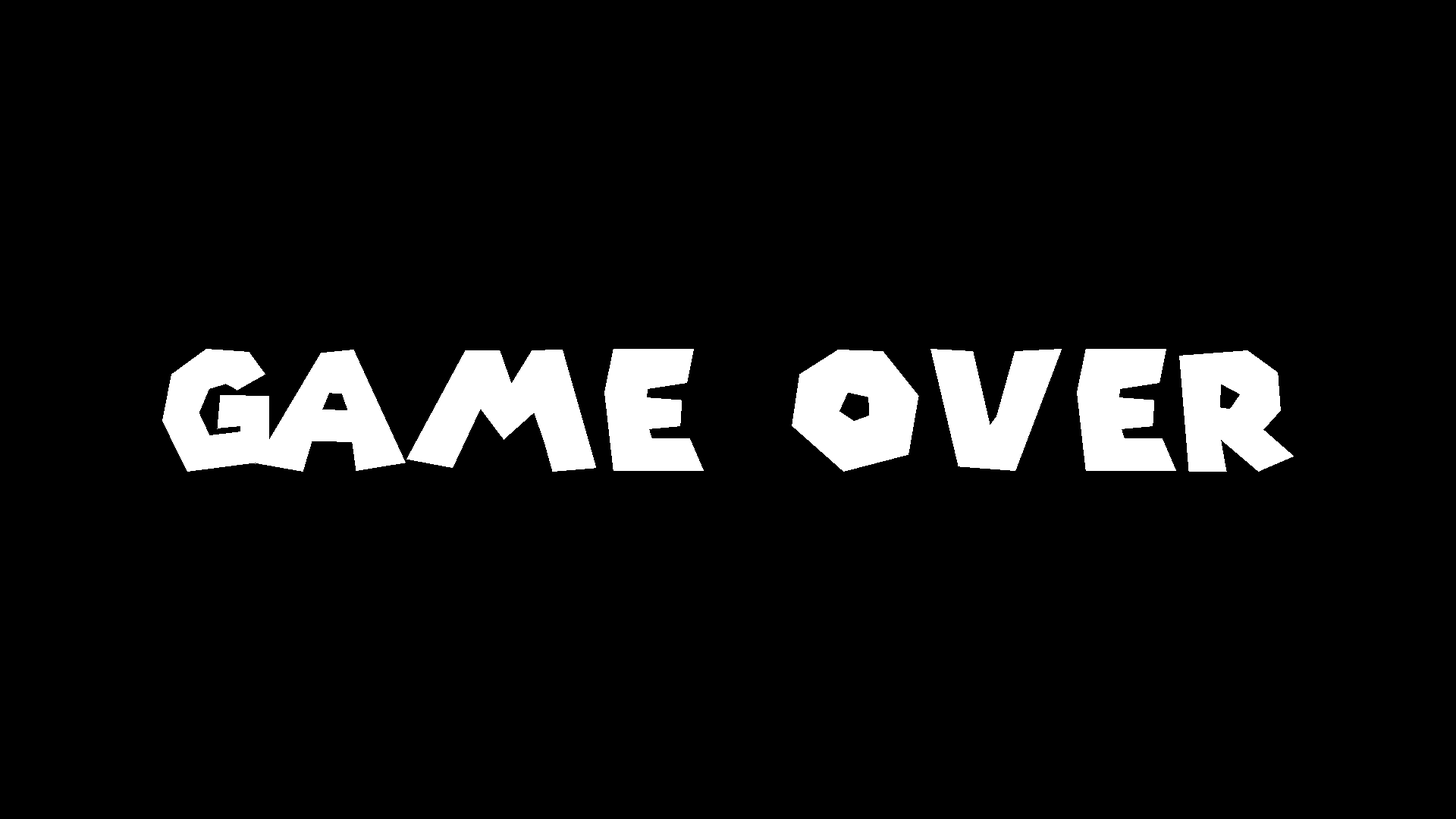
<style>
.page{position:relative;width:1456px;height:819px;background:#000000}
.page>*{position:absolute;margin:0}
.t1{font:164.3px "SuperMarioGalaxy";letter-spacing:0.05em;color:#ffffff}
</style>
<div class="page">
<p class="t1" style="left:162px;top:349px;width:1132px;height:123px">Game Over</p>
</div>
